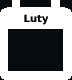
<style>
.page{position:relative;width:72px;height:80px;background:#ffffff}
.page>*{position:absolute;margin:0}
.t1{font:10px "DejaVuSans-Bold";color:#070809}
</style>
<div class="page">
<p class="t1" style="left:24px;top:14px;width:25px;height:11px">Luty</p>
</div>
